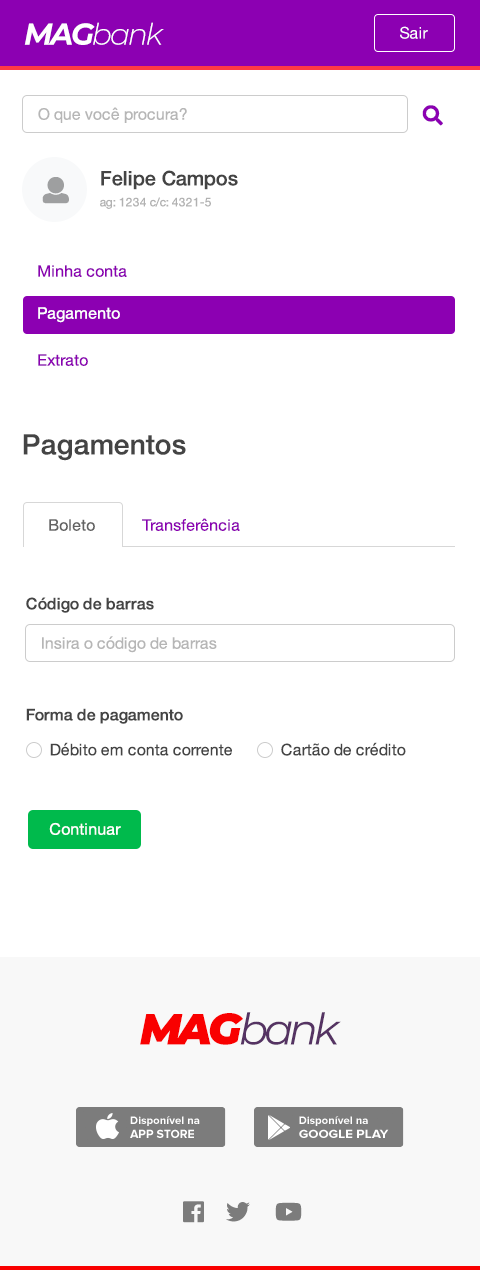
<style>
.page{position:relative;width:480px;height:1270px;background:#ffffff}
.page>*{position:absolute;margin:0}
.t1{font:30px "Montserrat-LightItalic";letter-spacing:-0.075em;color:#ffffff}
.t2{font:30px "Montserrat-BoldItalic";letter-spacing:-0.075em;color:#ffffff}
.t3{font:16px "HelveticaNeue";color:#ffffff}
.t4{font:16px "HelveticaNeue";color:#b6b6b6}
.t5{font:20px "HelveticaNeue-Medium";color:#444444}
.t6{font:12px "HelveticaNeue";color:#b1b1b1}
.t7{font:16px "HelveticaNeue";color:#8c00b2}
.t8{font:28px "HelveticaNeue-Medium";color:#444444}
.t9{font:16px "HelveticaNeue";color:#626262}
.t10{font:16px "HelveticaNeue-Medium";color:#444444}
.t11{font:16px "HelveticaNeue";color:#444444}
.t12{font:43.4px "Montserrat-Italic";letter-spacing:-0.075em;color:#553363}
.t13{font:43.4px "Montserrat-BlackItalic";letter-spacing:-0.075em;color:#f90000}
</style>
<div class="page">
<p class="t1" style="left:24px;top:22px;width:140px;height:23px"><span class="t2">MAG</span>bank</p>
<p class="t3" style="left:400px;top:26px;width:28px;height:13px">Sair</p>
<p class="t4" style="left:38px;top:107px;width:149px;height:16px">O que você procura?</p>
<p class="t5" style="left:101px;top:170px;width:137px;height:20px">Felipe Campos</p>
<p class="t6" style="left:100px;top:197px;width:111px;height:12px">ag: 1234 c/c: 4321-5</p>
<p class="t7" style="left:38px;top:265px;width:89px;height:12px">Minha conta</p>
<p class="t3" style="left:38px;top:307px;width:82px;height:16px">Pagamento</p>
<p class="t7" style="left:38px;top:354px;width:50px;height:12px">Extrato</p>
<p class="t8" style="left:23px;top:434px;width:163px;height:27px">Pagamentos</p>
<p class="t9" style="left:49px;top:519px;width:46px;height:12px">Boleto</p>
<p class="t7" style="left:142px;top:518px;width:98px;height:13px">Transferência</p>
<p class="t10" style="left:26px;top:597px;width:128px;height:16px">Código de barras</p>
<p class="t4" style="left:42px;top:636px;width:175px;height:17px">Insira o código de barras</p>
<p class="t10" style="left:26px;top:708px;width:157px;height:16px">Forma de pagamento</p>
<p class="t11" style="left:50px;top:742px;width:182px;height:14px">Débito em conta corrente</p>
<p class="t11" style="left:281px;top:742px;width:125px;height:14px">Cartão de crédito</p>
<p class="t3" style="left:49px;top:822px;width:72px;height:13px">Continuar</p>
<p class="t12" style="left:140px;top:1012px;width:201px;height:33px"><span class="t13">MAG</span>bank</p>
</div>
